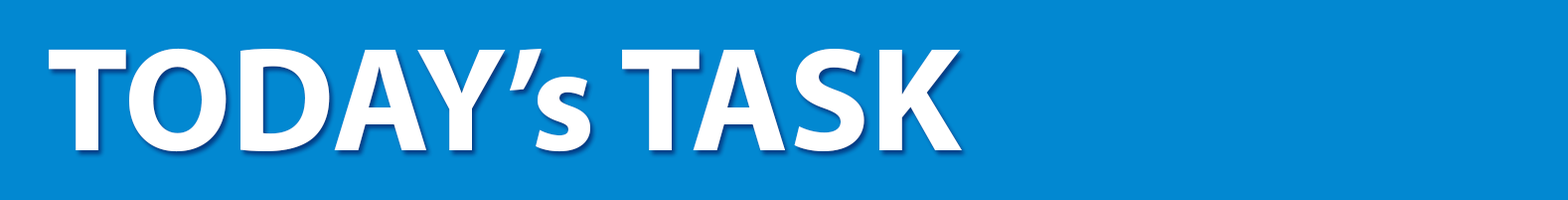
<style>
.page{position:relative;width:1568px;height:200px;background:#0288d1}
.page>*{position:absolute;margin:0}
.t1{font:149px "MyriadPro-Bold";color:#ffffff}
</style>
<div class="page">
<p class="t1" style="left:49px;top:48px;width:913px;height:104px">TODAY’s TASK</p>
</div>
